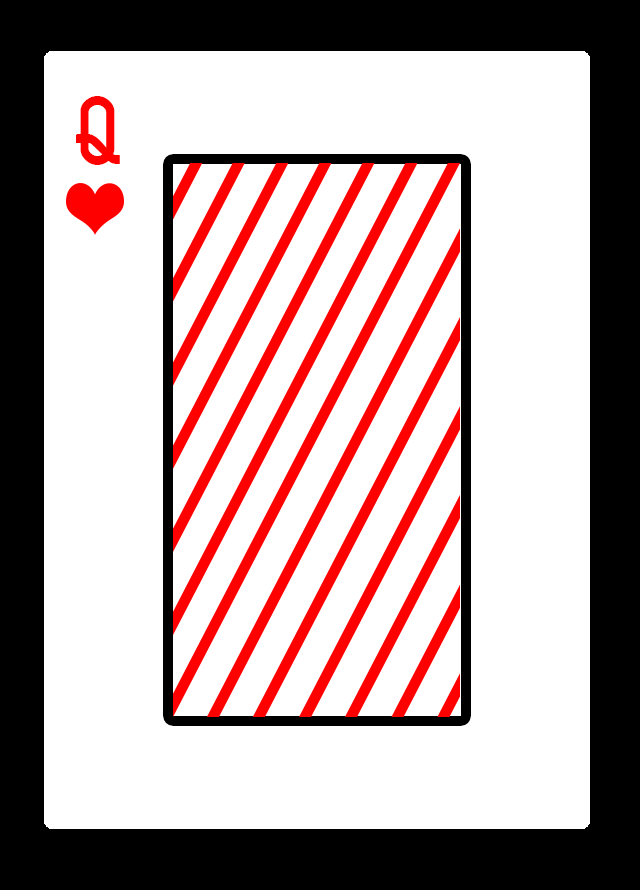
<style>
.page{position:relative;width:640px;height:890px;background:#ffffff}
.page>*{position:absolute;margin:0}
.t1{font:80px "CardCharacters";color:#ff0000}
</style>
<div class="page">
<p class="t1" style="left:76px;top:96px;width:44px;height:69px">Q</p>
</div>
